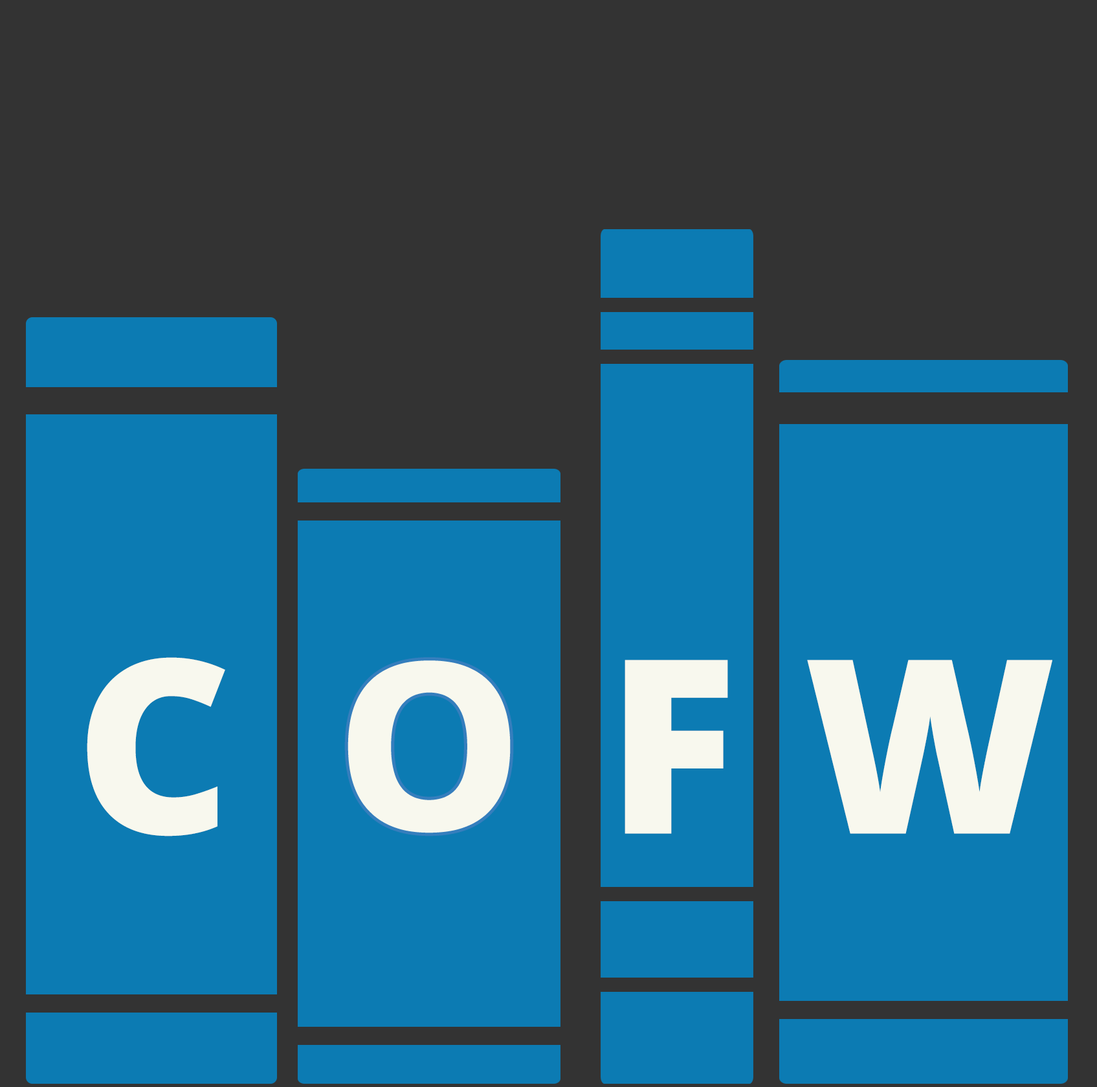
<style>
.page{position:relative;width:1097px;height:1087px;background:#0c7bb3}
.page>*{position:absolute;margin:0}
.t1{font:242.7px "OpenSans-Extrabold";letter-spacing:0.025em;color:#f8f8ee}
</style>
<div class="page">
<p class="t1" style="left:87px;top:657px;width:138px;height:179px">C</p>
<p class="t1" style="left:344px;top:657px;width:170px;height:179px">O</p>
<p class="t1" style="left:625px;top:660px;width:103px;height:174px">F</p>
<p class="t1" style="left:807px;top:660px;width:246px;height:174px">W</p>
</div>
